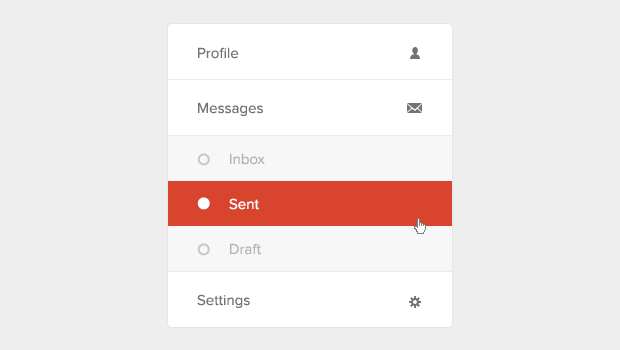
<style>
.page{position:relative;width:620px;height:350px;background:#eeeeee}
.page>*{position:absolute;margin:0}
.t1{font:15px/55px "ProximaNova-Regular";color:#727272}
.t2{font:15px/45px "ProximaNova-Regular";color:#b4b4b4}
.t3{font:15px/45px "ProximaNova-Regular";color:#ffffff}
.t4{font:15px "ProximaNova-Regular";color:#727272}
</style>
<div class="page">
<p class="t1" style="left:198px;top:47px;width:65px;height:69px">Profile<br>Messages</p>
<p class="t2" style="left:229px;top:153px;width:36px;height:102px">Inbox<br><span class="t3">Sent<br></span>Draft</p>
<p class="t4" style="left:197px;top:294px;width:53px;height:14px">Settings</p>
</div>
